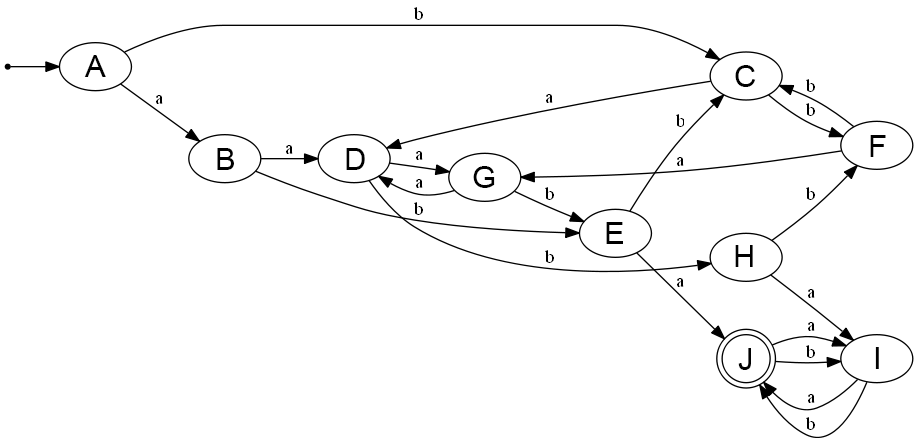
<style>
.page{position:relative;width:918px;height:443px;background:#ffffff}
.page>*{position:absolute;margin:0}
.t1{font:31.3px "ArialMT";letter-spacing:-0.1em;color:#000000}
</style>
<div class="page">
<p class="t1" style="left:84px;top:55px;width:22px;height:22px">A</p>
<p class="t1" style="left:735px;top:65px;width:21px;height:22px">C</p>
<p class="t1" style="left:870px;top:135px;width:16px;height:22px">F</p>
<p class="t1" style="left:217px;top:148px;width:17px;height:22px">B</p>
<p class="t1" style="left:346px;top:148px;width:19px;height:22px">D</p>
<p class="t1" style="left:473px;top:166px;width:22px;height:22px">G</p>
<p class="t1" style="left:606px;top:222px;width:17px;height:22px">E</p>
<p class="t1" style="left:735px;top:245px;width:18px;height:22px">H</p>
<p class="t1" style="left:738px;top:348px;width:13px;height:22px">J</p>
<p class="t1" style="left:875px;top:347px;width:4px;height:22px">I</p>
</div>
